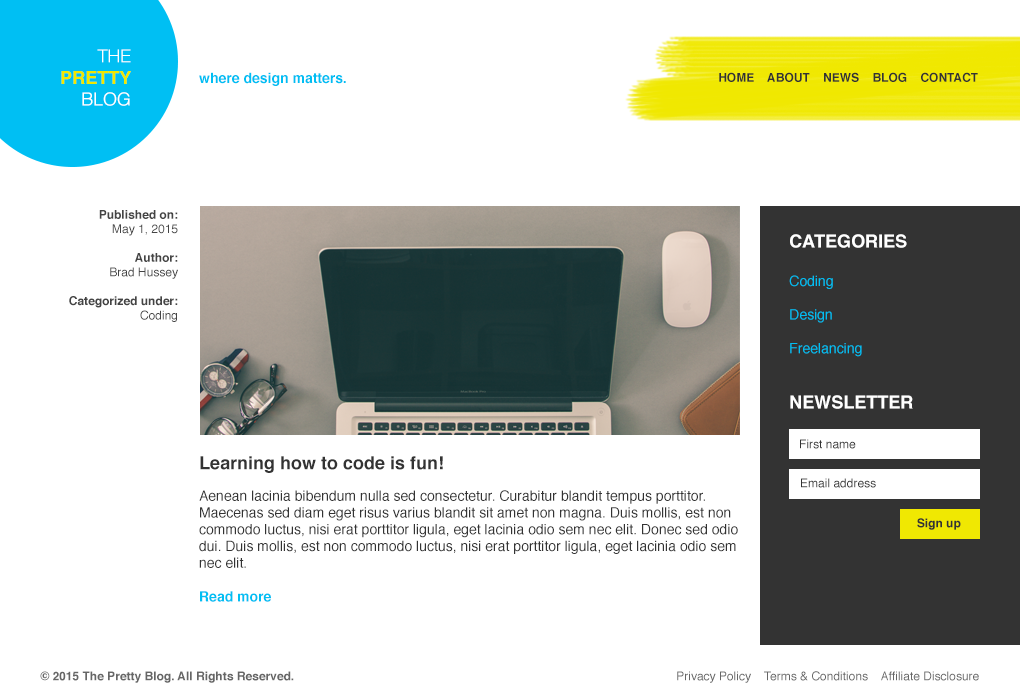
<style>
.page{position:relative;width:1020px;height:700px;background:#ffffff}
.page>*{position:absolute;margin:0}
.t1{font:18px "Helvetica-Bold";color:#f0e800}
.t2{font:18px "HelveticaNeue-Light";color:#ffffff}
.t3{font:18px "Helvetica";color:#ffffff}
.t4{font:14px "Helvetica-Bold";color:#00bff3}
.t5{font:12px "Helvetica-Bold";color:#333333}
.t6{font:12px "Helvetica-Bold";color:#444444}
.t7{font:12px "Helvetica";color:#444444}
.t8{font:14px "Helvetica";color:#00bff3}
.t9{font:18px "Helvetica-Bold";color:#ffffff}
.t10{font:12px "Helvetica";color:#333333}
.t11{font:18px "Helvetica-Bold";color:#333333}
.t12{font:14px "Helvetica";color:#333333}
.t13{font:12px "Helvetica-Bold";color:#666666}
.t14{font:12px "Helvetica";color:#666666}
</style>
<div class="page">
<p class="t1" style="left:61px;top:49px;width:70px;height:57px;text-align:right"><span class="t2">THE<br></span>PRETTY<br><span class="t3">BLOG</span></p>
<p class="t4" style="left:199px;top:72px;width:147px;height:14px">where design matters.</p>
<p class="t5" style="left:719px;top:72px;width:259px;height:10px">HOME    ABOUT    NEWS    BLOG    CONTACT</p>
<p class="t6" style="left:69px;top:210px;width:109px;height:112px;text-align:right">Published on:<br><span class="t7">May 1, 2015<br><br></span>Author:<br><span class="t7">Brad Hussey<br><br></span>Categorized under:<br><span class="t7">Coding</span></p>
<p class="t8" style="left:789px;top:234px;width:118px;height:123px"><span class="t9">CATEGORIES<br><br></span>Coding<br><br>Design<br><br>Freelancing</p>
<p class="t9" style="left:790px;top:395px;width:123px;height:14px">NEWSLETTER</p>
<p class="t10" style="left:800px;top:439px;width:56px;height:10px">First name</p>
<p class="t11" style="left:200px;top:456px;width:243px;height:17px">Learning how to code is fun!</p>
<p class="t10" style="left:801px;top:478px;width:75px;height:10px">Email address</p>
<p class="t12" style="left:199px;top:490px;width:539px;height:112px">Aenean lacinia bibendum nulla sed consectetur. Curabitur blandit tempus porttitor. Maecenas sed diam eget risus varius blandit sit amet non magna. Duis mollis, est non commodo luctus, nisi erat porttitor ligula, eget lacinia odio sem nec elit. Donec sed odio dui. Duis mollis, est non commodo luctus, nisi erat porttitor ligula, eget lacinia odio sem nec elit.<br><br><span class="t4">Read more</span></p>
<p class="t5" style="left:917px;top:518px;width:44px;height:12px">Sign up</p>
<p class="t13" style="left:40px;top:671px;width:254px;height:12px">© 2015 The Pretty Blog. All Rights Reserved.</p>
<p class="t14" style="left:677px;top:671px;width:302px;height:12px">Privacy Policy    Terms &amp; Conditions    Affiliate Disclosure</p>
</div>
